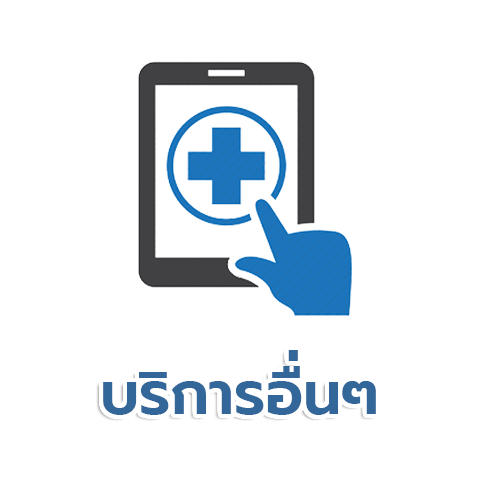
<style>
.page{position:relative;width:480px;height:480px;background:#ffffff}
.page>*{position:absolute;margin:0}
.t1{font:60px "Prompt-SemiBold";color:#336699}
</style>
<div class="page">
<p class="t1" style="left:288px;top:350px;width:10px;height:11px">่</p>
<p class="t1" style="left:103px;top:366px;width:273px;height:49px">บริการอืนๆ</p>
</div>
